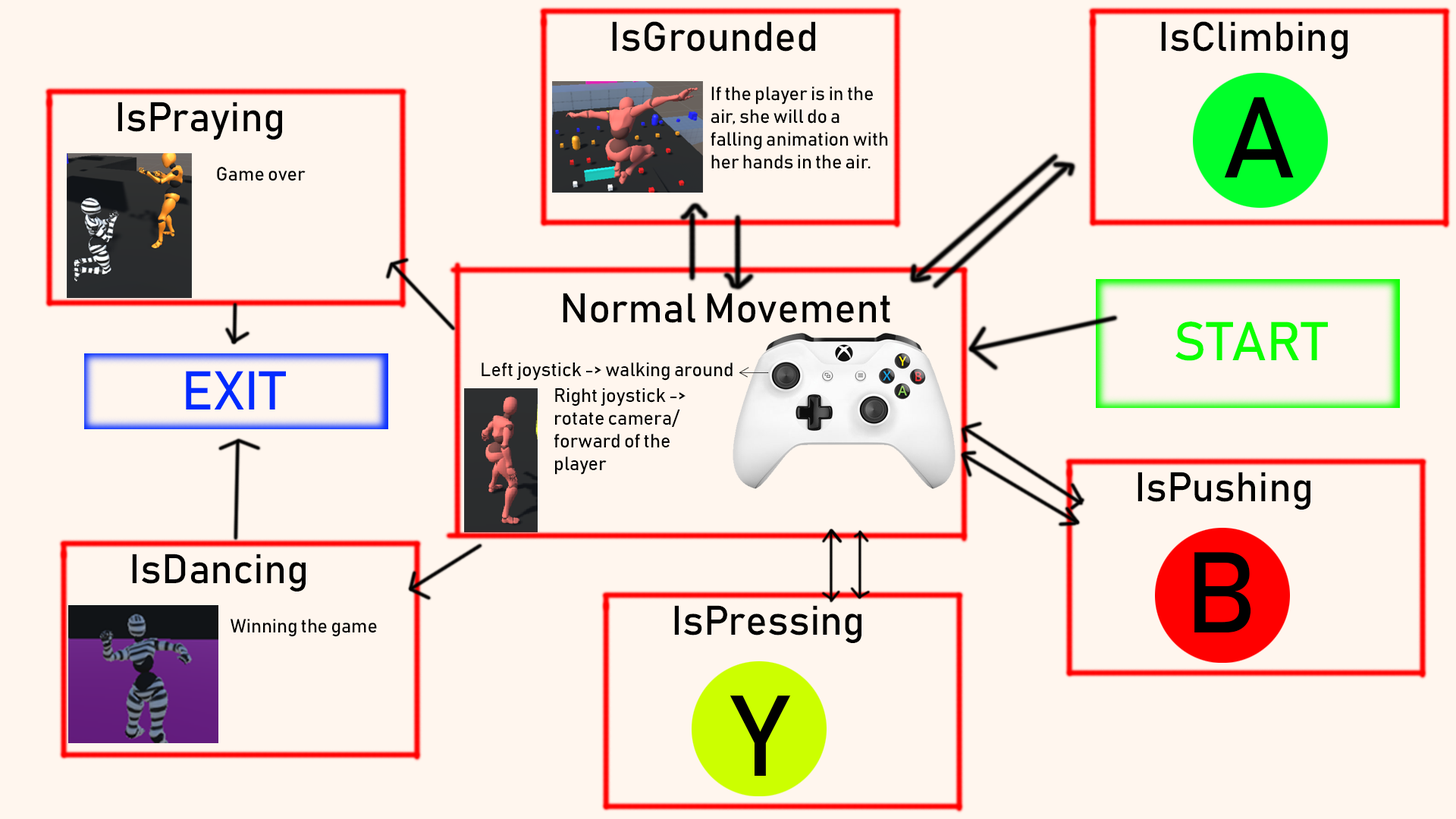
<style>
.page{position:relative;width:1456px;height:819px;background:#fff6ee}
.page>*{position:absolute;margin:0}
.t1{font:40.8px "Bahnschrift";color:#000000}
.t2{font:19px "Bahnschrift";color:#000000}
.t3{font:112.9px "Bahnschrift";color:#000000}
.t4{font:53.8px "Bahnschrift";color:#0cff00}
.t5{font:53.8px "Bahnschrift";color:#002aff}
.t6{font:113.1px "Bahnschrift";color:#000000}
</style>
<div class="page">
<p class="t1" style="left:612px;top:21px;width:203px;height:31px">IsGrounded</p>
<p class="t1" style="left:1161px;top:21px;width:187px;height:38px">IsClimbing</p>
<p class="t2" style="left:711px;top:86px;width:177px;height:83px">If the player is in the air, she will do a falling animation with her hands in the air.</p>
<p class="t1" style="left:118px;top:102px;width:164px;height:38px">IsPraying</p>
<p class="t3" style="left:1224px;top:97px;width:70px;height:80px">A</p>
<p class="t2" style="left:217px;top:167px;width:89px;height:14px">Game over</p>
<p class="t1" style="left:563px;top:293px;width:327px;height:30px">Normal Movement</p>
<p class="t4" style="left:1175px;top:322px;width:153px;height:39px">START</p>
<p class="t2" style="left:482px;top:362px;width:251px;height:19px">Left joystick -&gt; walking around</p>
<p class="t5" style="left:186px;top:371px;width:100px;height:38px">EXIT</p>
<p class="t2" style="left:554px;top:388px;width:132px;height:87px">Right joystick -&gt; rotate camera/ forward of the player</p>
<p class="t1" style="left:1137px;top:472px;width:173px;height:38px">IsPushing</p>
<p class="t1" style="left:132px;top:554px;width:174px;height:37px">IsDancing</p>
<p class="t6" style="left:1194px;top:552px;width:57px;height:80px">B</p>
<p class="t1" style="left:674px;top:605px;width:187px;height:38px">IsPressing</p>
<p class="t2" style="left:231px;top:619px;width:146px;height:18px">Winning the game</p>
<p class="t6" style="left:730px;top:695px;width:61px;height:81px">Y</p>
</div>
